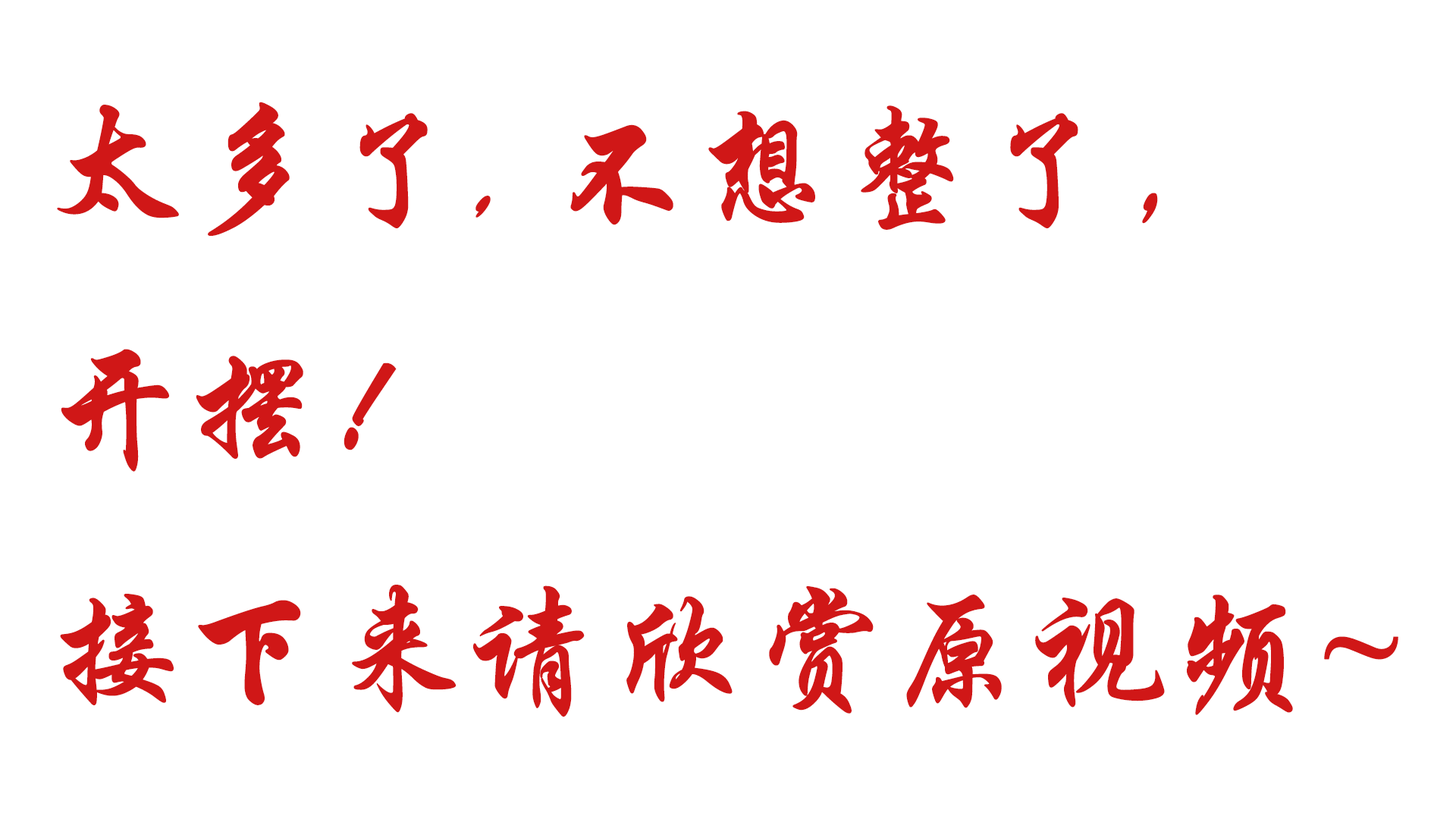
<style>
.page{position:relative;width:1456px;height:819px;background:#ffffff}
.page>*{position:absolute;margin:0}
.t1{font:137.3px "STXingkai";color:#d01717;font-weight:bold}
</style>
<div class="page">
<p class="t1" style="left:57px;top:102px;width:1341px;height:615px">太多了, 不想整了，<br>开摆！<br>接下来请欣赏原视频~</p>
</div>
